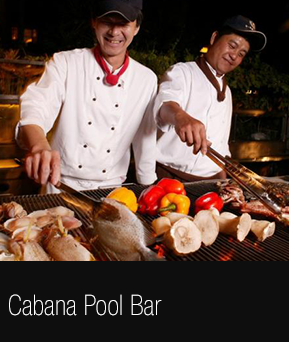
<style>
.page{position:relative;width:289px;height:342px;background:#0e0e0e}
.page>*{position:absolute;margin:0}
.t1{font:28.3px "HelveticaNeueLTPro-ThCn";color:#ffffff}
</style>
<div class="page">
<p class="t1" style="left:9px;top:294px;width:153px;height:22px">Cabana Pool Bar</p>
</div>
